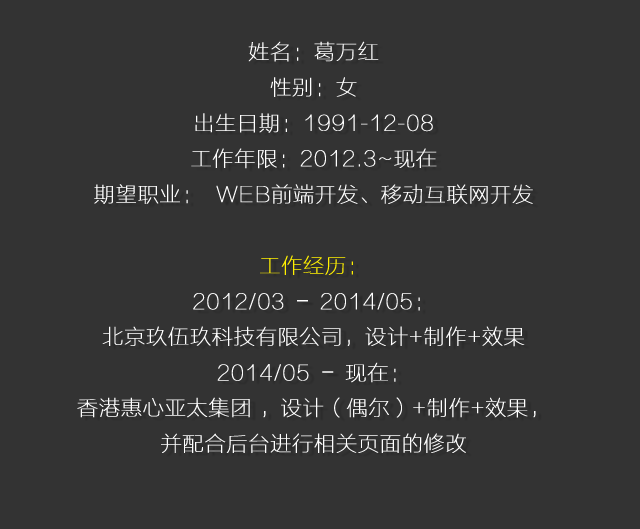
<style>
.page{position:relative;width:640px;height:529px;background:#333333}
.page>*{position:absolute;margin:0}
.t1{font:21.4px/35.6px "FZLTCXHJW--GB1-0";color:#ffffff;font-weight:bold}
.t2{font:21.4px/35.6px "FZLTCXHJW--GB1-0";color:#fff000;font-weight:bold}
.t3{font:21.4px/35.6px "AdobeHeitiStd-Regular";color:#ffffff;font-weight:bold}
</style>
<div class="page">
<p class="t1" style="left:77px;top:41px;width:459px;height:412px;text-align:center">姓名：葛万红<br>性别：女<br>出生日期：1991-12-08<br>工作年限：2012.3~现在<br>期望职业：  WEB前端开发、移动互联网开发<br><br><span class="t2">工作经历：<br></span>2012/03 <span class="t3">–</span> 2014/05：<br>北京玖伍玖科技有限公司，设计+制作+效果<br>2014/05 <span class="t3">–</span> 现在：<br>香港惠心亚太集团 ，设计（偶尔）+制作+效果，  <br>并配合后台进行相关页面的修改</p>
</div>
